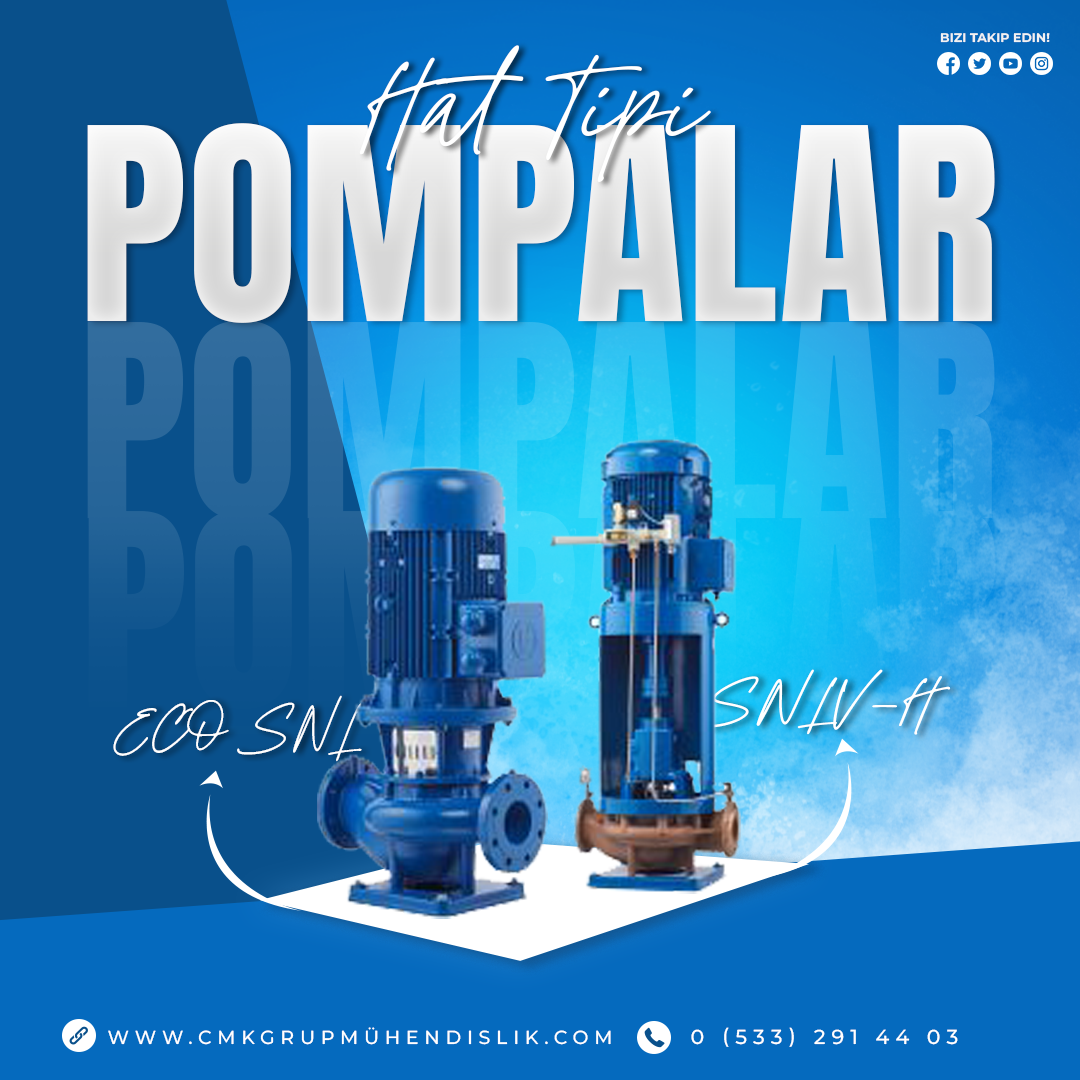
<style>
.page{position:relative;width:1080px;height:1080px}
.page>*{position:absolute;margin:0}
.t1{font:12.6px "Montserrat-Bold";color:#f2f2f2;text-transform:uppercase}
.t2{font:132.2px "GoldenHopesPERSONALUSEONLY-Regular";color:#ffffff}
.t3{font:227.9px "Anton-Regular";color:#e6e6e5;text-transform:uppercase}
.t4{font:227.9px "Anton-Regular";text-transform:uppercase}
.t5{font:68.2px "GoldenHopesPERSONALUSEONLY-Regular";color:#ffffff;scale:1.11 1}
.t6{font:69.3px "GoldenHopesPERSONALUSEONLY-Regular";color:#ffffff;scale:0.93 1}
.t7{font:18.9px "Montserrat-Medium";letter-spacing:0.3em;color:#ffffff;text-transform:uppercase}
.t8{font:20.3px "Montserrat-Medium";letter-spacing:0.3em;color:#ffffff;text-transform:uppercase}
</style>
<div class="page">
<p class="t1" style="left:940px;top:33px;width:110px;height:10px">bizi takip edin!</p>
<p class="t2" style="left:359px;top:45px;width:352px;height:137px">Hat Tipi</p>
<p class="t3" style="left:87px;top:123px;width:908px;height:200px">pompalar</p>
<p class="t4" style="left:87px;top:320px;width:908px;height:200px">pompalar</p>
<p class="t5" style="left:691px;top:669px;width:260px;height:66px">SNLV-H</p>
<p class="t6" style="left:113px;top:695px;width:249px;height:67px">ECO SNL</p>
<p class="t7" style="left:108px;top:1027px;width:503px;height:18px">www.cmkgrupmühendislik.com</p>
<p class="t8" style="left:691px;top:1027px;width:267px;height:20px">0 (533) 291 44 03</p>
</div>
